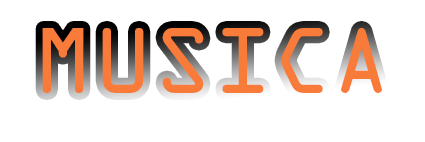
<style>
.page{position:relative;width:425px;height:142px;background:#ffffff}
.page>*{position:absolute;margin:0}
.t1{font:83px "OCRAStd";color:#f87b3a}
</style>
<div class="page">
<p class="t1" style="left:42px;top:28px;width:340px;height:65px">MUSICA</p>
</div>
